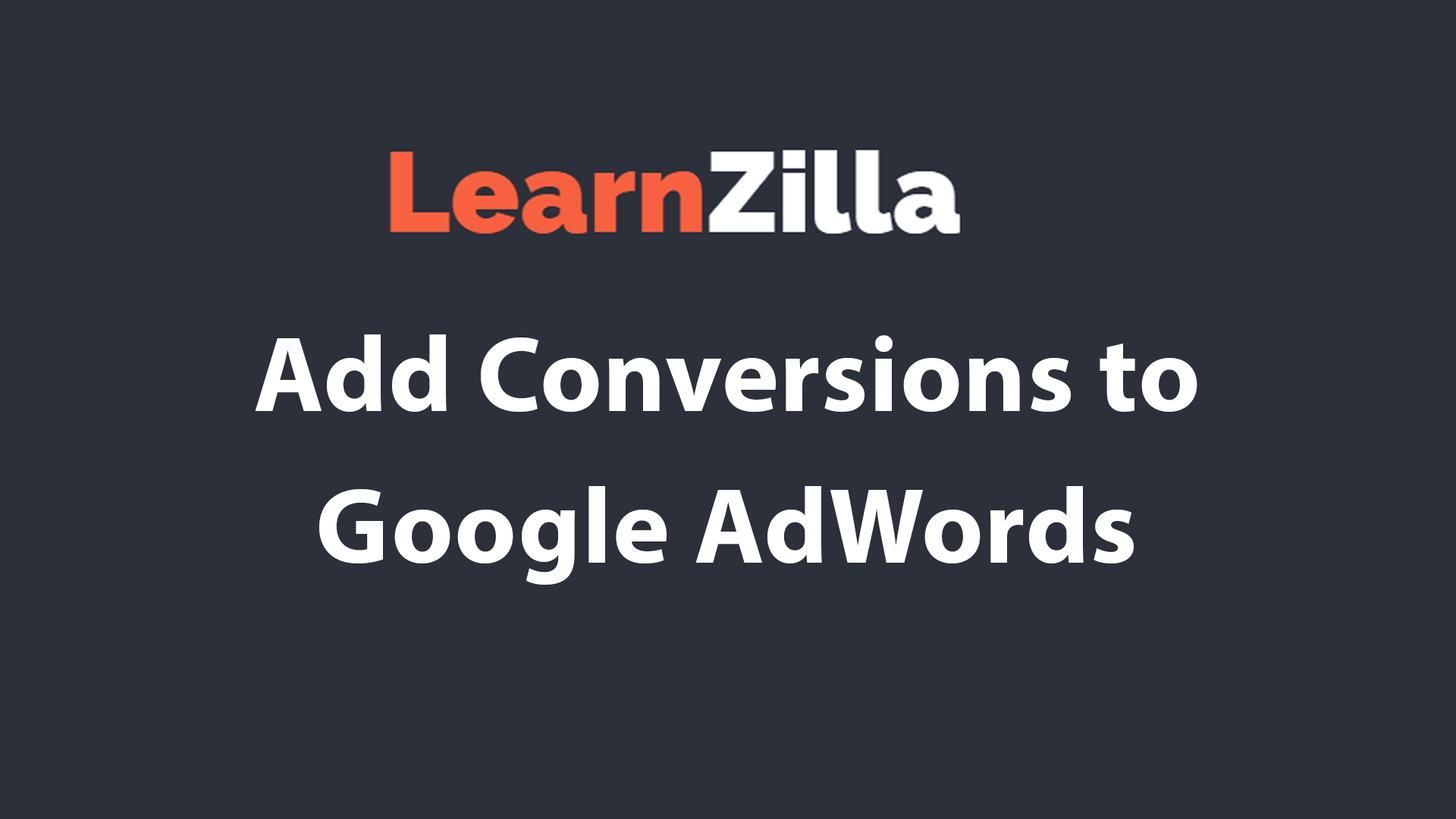
<style>
.page{position:relative;width:1456px;height:819px;background:#2b303a}
.page>*{position:absolute;margin:0}
.t1{font:107.7px/151.7px "MyriadPro-Bold";letter-spacing:0.01em;color:#ffffff}
</style>
<div class="page">
<p class="t1" style="left:255px;top:334px;width:942px;height:251px;text-align:center">Add Conversions to<br>Google AdWords</p>
</div>
